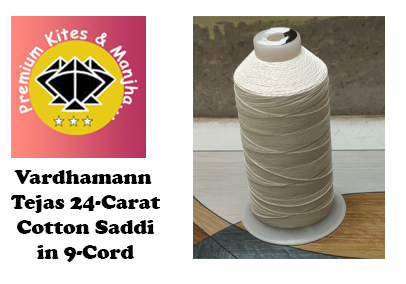
<style>
.page{position:relative;width:406px;height:284px;background:#ffffff}
.page>*{position:absolute;margin:0}
.t1{font:20.8px "CooperBlack";color:#000000}
</style>
<div class="page">
<p class="t1" style="left:11px;top:170px;width:149px;height:92px;text-align:center">Vardhamann <br>Tejas 24-Carat<br>Cotton Saddi<br>in 9-Cord</p>
</div>
